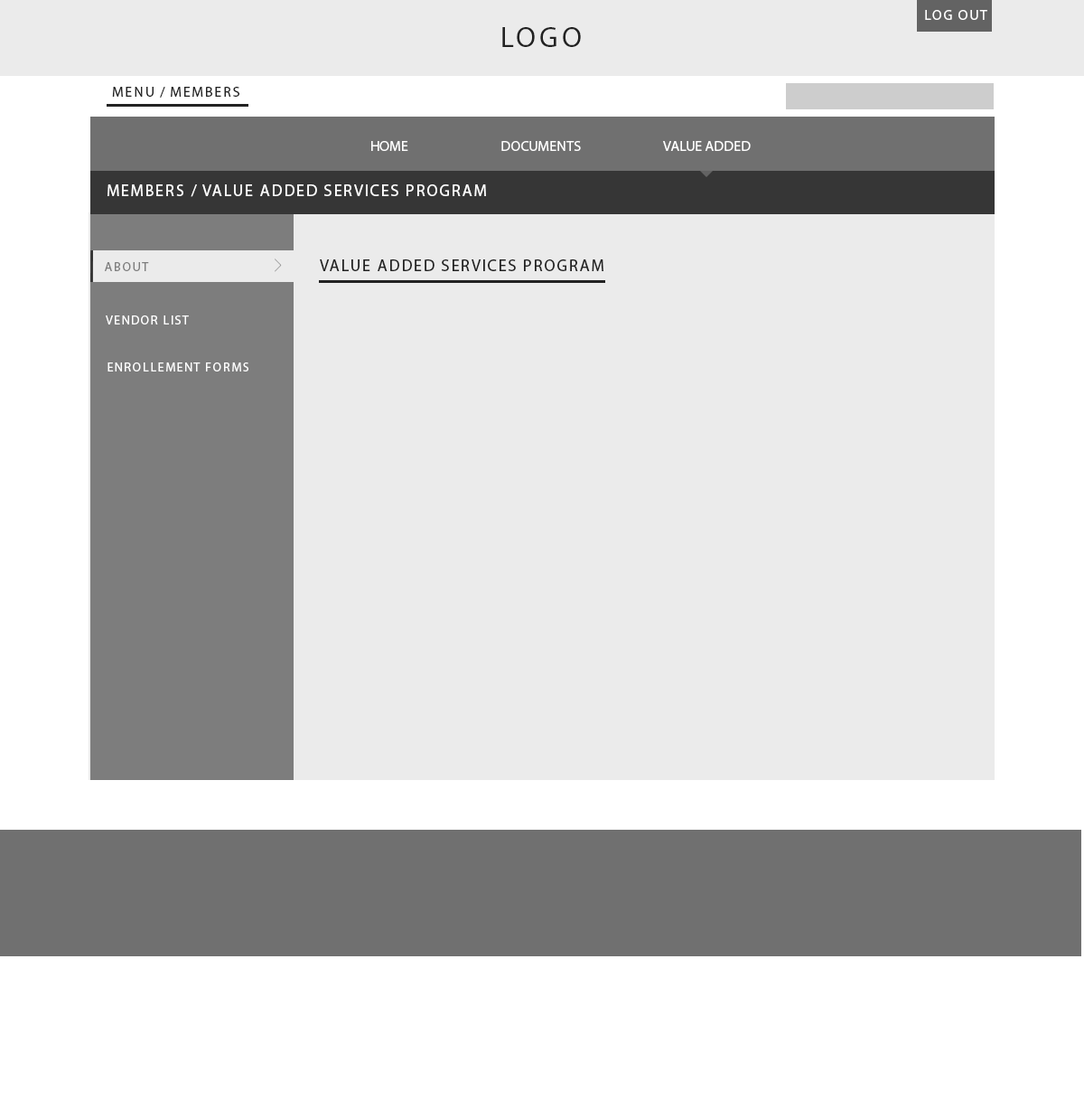
<style>
.page{position:relative;width:1084px;height:1100px;background:#ebebeb}
.page>*{position:absolute;margin:0}
.t1{font:14.5px "MyriadPro-Regular";letter-spacing:0.1em;color:#ffffff;text-transform:uppercase}
.t2{font:28.9px "MyriadPro-Regular";letter-spacing:0.12em;color:#222222;text-transform:uppercase}
.t3{font:14.5px "MyriadPro-Regular";letter-spacing:0.1em;color:#222222;text-transform:uppercase}
.t4{font:14.4px "MyriadPro-Regular";color:#ffffff;text-transform:uppercase}
.t5{font:16.3px "MyriadPro-Regular";letter-spacing:0.1em;color:#ffffff}
.t6{font:12.3px "MyriadPro-Regular";letter-spacing:0.1em;text-transform:uppercase;scale:1.03 1}
.t7{font:12.7px "MyriadPro-Regular";letter-spacing:0.1em;color:#7d7d7d;text-transform:uppercase}
.t8{font:16.3px "MyriadPro-Regular";letter-spacing:0.1em;color:#222222;text-transform:uppercase}
.t9{font:12.7px "MyriadPro-Regular";letter-spacing:0.1em;color:#ffffff;text-transform:uppercase}
</style>
<div class="page">
<p class="t1" style="left:925px;top:10px;width:63px;height:10px">Log Out</p>
<p class="t2" style="left:502px;top:27px;width:79px;height:20px">LOGO</p>
<p class="t3" style="left:112px;top:87px;width:127px;height:11px">MENU / Members</p>
<p class="t4" style="left:371px;top:141px;width:380px;height:11px">Home   Documents   Value Added</p>
<p class="t5" style="left:108px;top:184px;width:378px;height:13px">MEMBERS / VALUE ADDED SERVICES PROGRAM</p>
<p class="t6" style="left:105px;top:261px;width:44px;height:9px">About</p>
<p class="t7" style="left:105px;top:262px;width:44px;height:9px">About</p>
<p class="t8" style="left:320px;top:259px;width:284px;height:12px">Value Added Services Program</p>
<p class="t9" style="left:106px;top:315px;width:83px;height:9px">vENDOR lIST</p>
<p class="t9" style="left:108px;top:362px;width:140px;height:9px">eNROLLEMENT fORMS</p>
</div>
